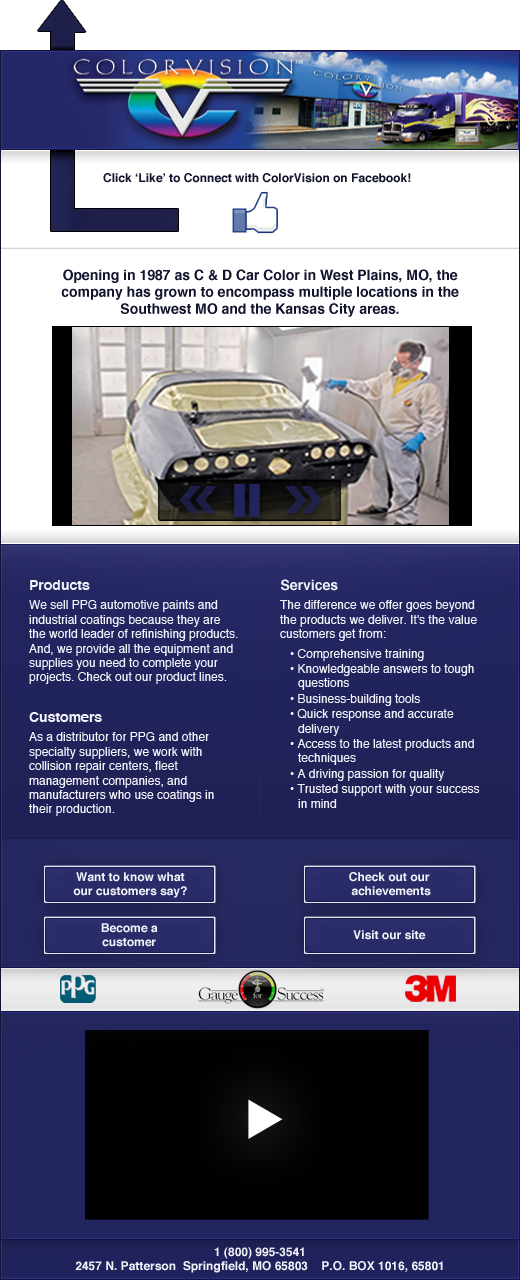
<style>
.page{position:relative;width:520px;height:1280px}
.page>*{position:absolute;margin:0}
.t1{font:12px "Helvetica-Bold";color:#13142d}
.t2{font:14px "Helvetica-Bold";color:#13142d}
.t3{font:12px "Helvetica";color:#f2f2fa}
.t4{font:14px "Helvetica-Bold";color:#f2f2fa}
.t5{font:12px "Helvetica-Bold";color:#f1f1fa}
.t6{font:12px "Helvetica-Bold";color:#f2f2fa}
</style>
<div class="page">
<p class="t1" style="left:103px;top:173px;width:308px;height:10px">Click ‘Like’ to Connect with ColorVision on Facebook!</p>
<p class="t2" style="left:61px;top:269px;width:398px;height:48px;text-align:center">Opening in 1987 as C &amp; D Car Color in West Plains, MO, the company has grown to encompass multiple locations in the Southwest MO and the Kansas City areas.</p>
<p class="t3" style="left:29px;top:580px;width:209px;height:236px"><span class="t4">Products<br></span>We sell PPG automotive paints and industrial coatings because they are the world leader of refinishing products. And, we provide all the equipment and supplies you need to complete your projects. Check out our product lines.<br><br><br><span class="t4">Customers<br></span>As a distributor for PPG and other specialty suppliers, we work with collision repair centers, fleet management companies, and manufacturers who use coatings in their production.</p>
<p class="t4" style="left:281px;top:579px;width:57px;height:12px">Services</p>
<p class="t3" style="left:280px;top:600px;width:200px;height:208px"><span class="t4"> <br></span>The difference we offer goes beyond the products we deliver. It's the value customers get from: <br>• Comprehensive training<br>• Knowledgeable answers to tough questions<br>• Business-building tools<br>• Quick response and accurate delivery<br>• Access to the latest products and techniques<br>• A driving passion for quality<br>• Trusted support with your success in mind</p>
<p class="t5" style="left:73px;top:872px;width:114px;height:26px;text-align:center">Want to know what <br>our customers say?</p>
<p class="t5" style="left:349px;top:872px;width:82px;height:24px;text-align:center">Check out our <br>     achievements</p>
<p class="t5" style="left:101px;top:923px;width:57px;height:24px;text-align:center">Become a <br>customer</p>
<p class="t6" style="left:353px;top:930px;width:73px;height:10px">Visit our site</p>
<p class="t6" style="left:75px;top:1247px;width:368px;height:26px;text-align:center">1 (800) 995-3541<br>2457 N. Patterson  Springfield, MO 65803    P.O. BOX 1016, 65801</p>
</div>
